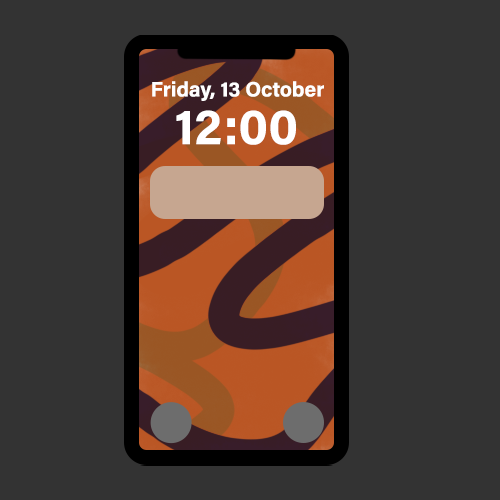
<style>
.page{position:relative;width:500px;height:500px;background:#333333}
.page>*{position:absolute;margin:0}
.t1{font:20.8px "AcuminConcept-Bold";color:#ffffff}
.t2{font:50px "AcuminConcept-Bold";color:#ffffff}
</style>
<div class="page">
<p class="t1" style="left:152px;top:81px;width:172px;height:20px">Friday, 13 October</p>
<p class="t2" style="left:176px;top:110px;width:120px;height:35px">12:00</p>
</div>
